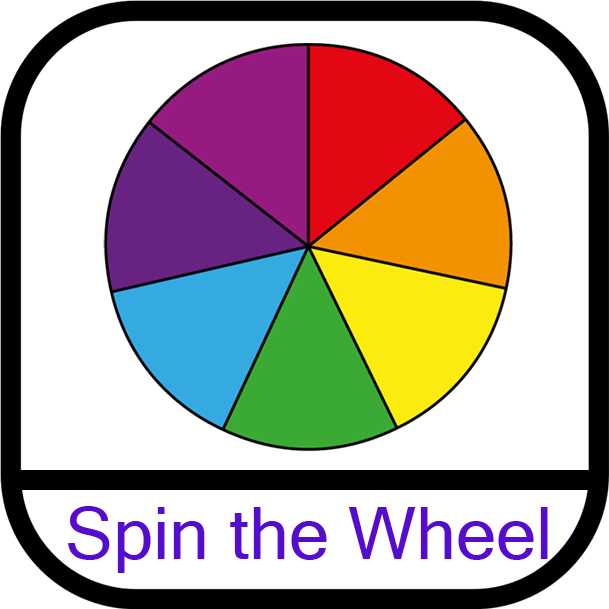
<style>
.page{position:relative;width:609px;height:609px;background:#ffffff}
.page>*{position:absolute;margin:0}
.t1{font:72px "MicrosoftSansSerif";color:#560cce}
</style>
<div class="page">
<p class="t1" style="left:68px;top:506px;width:480px;height:67px">Spin the Wheel</p>
</div>
